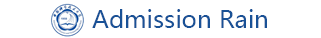
<style>
.page{position:relative;width:321px;height:38px;background:#ffffff}
.page>*{position:absolute;margin:0}
.t1{font:24px "MicrosoftYaHeiUI";color:#195196}
</style>
<div class="page">
<p class="t1" style="left:92px;top:9px;width:175px;height:19px">Admission Rain</p>
</div>
